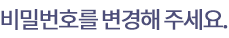
<style>
.page{position:relative;width:229px;height:38px;background:#ffffff}
.page>*{position:absolute;margin:0}
.t1{font:23px "NotoSansKR-Regular";letter-spacing:-0.095em;color:#4d4e7a;font-weight:bold}
</style>
<div class="page">
<p class="t1" style="left:1px;top:9px;width:227px;height:21px">비밀번호를 변경해 주세요.</p>
</div>
